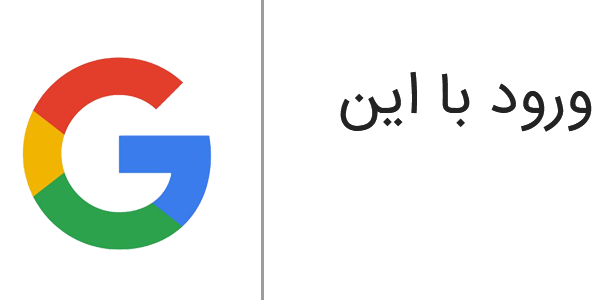
<style>
.page{position:relative;width:600px;height:300px;background:#ffffff}
.page>*{position:absolute;margin:0}
.t1{font:60px "IRANSansMobile";color:#232323}
</style>
<div class="page">
<p class="t1" style="left:340px;top:71px;width:252px;height:61px">ورود با این</p>
</div>
